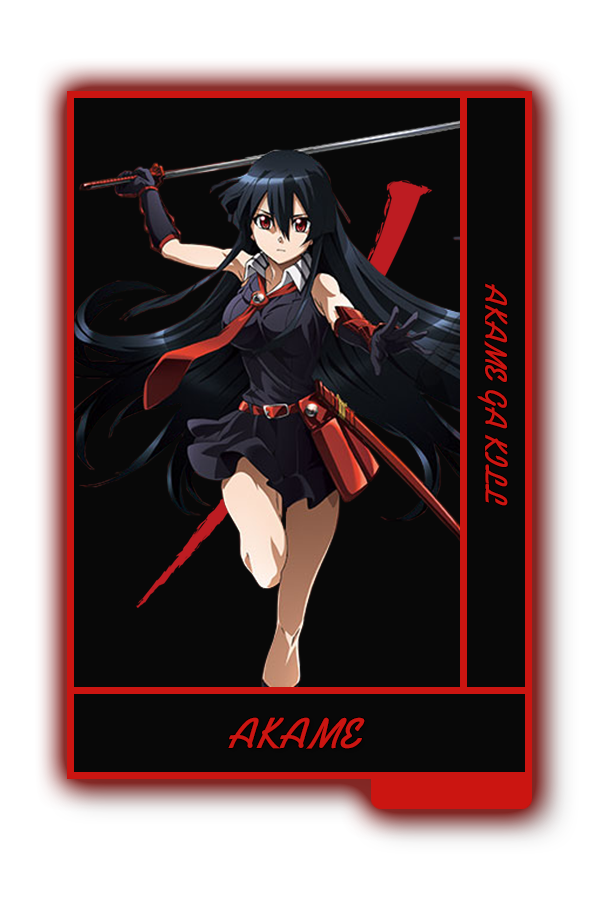
<style>
.page{position:relative;width:600px;height:900px;background:#080808}
.page>*{position:absolute;margin:0}
.t1{font:31.2px "Alako-Bold";color:#cb1511}
.t2{font:43.2px "Alako-Bold";color:#cb1511}
</style>
<div class="page">
<p class="t1" style="left:477px;top:283px;width:31px;height:223px;rotate:90deg">AKAME GA KILL</p>
<p class="t2" style="left:228px;top:717px;width:137px;height:32px">AKAME</p>
</div>
